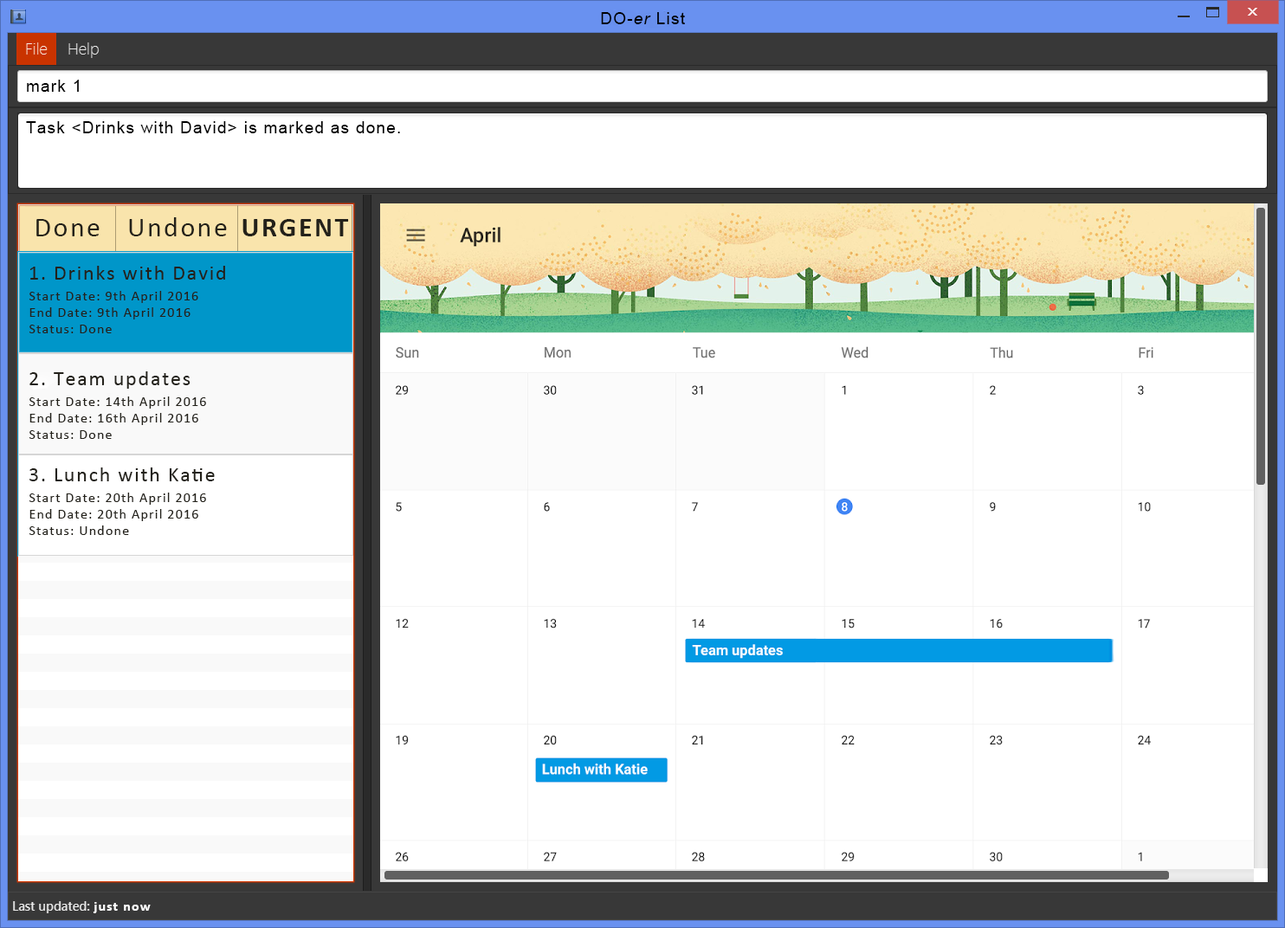
<style>
.page{position:relative;width:1285px;height:928px;background:#ffffff}
.page>*{position:absolute;margin:0}
.t1{font:16.2px "ArialMT";letter-spacing:0.075em;color:#000000}
.t2{font:16.2px "Arial-ItalicMT";letter-spacing:0.075em;color:#000000}
.t3{font:27.7px "Calibri";letter-spacing:0.075em;color:#23211a}
.t4{font:27.7px "Calibri-Bold";letter-spacing:0.075em;color:#23211a}
.t5{font:20.8px "Calibri";letter-spacing:0.075em;color:#23211a}
.t6{font:13.9px "Calibri";letter-spacing:0.075em;color:#23211a}
.t7{font:13.9px "Calibri-Bold";letter-spacing:0.075em;color:#ffffff}
</style>
<div class="page">
<p class="t1" style="left:601px;top:12px;width:84px;height:12px">DO-<span class="t2">er </span>List</p>
<p class="t1" style="left:27px;top:80px;width:52px;height:12px">mark 1</p>
<p class="t1" style="left:26px;top:121px;width:374px;height:12px">Task &lt;Drinks with David&gt; is marked as done.</p>
<p class="t3" style="left:36px;top:219px;width:64px;height:17px">Done</p>
<p class="t3" style="left:129px;top:217px;width:98px;height:19px">Undone</p>
<p class="t4" style="left:242px;top:219px;width:107px;height:17px">URGENT</p>
<p class="t5" style="left:29px;top:266px;width:196px;height:14px">1. Drinks with David</p>
<p class="t6" style="left:29px;top:291px;width:169px;height:42px">Start Date: 9th April 2016<br>End Date: 9th April 2016<br>Status: Done</p>
<p class="t5" style="left:29px;top:371px;width:161px;height:18px">2. Team updates</p>
<p class="t6" style="left:29px;top:397px;width:177px;height:42px">Start Date: 14th April 2016<br>End Date: 16th April 2016<br>Status: Done</p>
<p class="t5" style="left:29px;top:468px;width:186px;height:13px">3. Lunch with Katie</p>
<p class="t6" style="left:29px;top:493px;width:177px;height:42px">Start Date: 20th April 2016<br>End Date: 20th April 2016<br>Status: Undone</p>
<p class="t7" style="left:93px;top:902px;width:58px;height:11px">just now</p>
</div>
